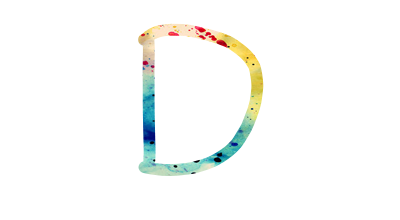
<style>
.page{position:relative;width:400px;height:220px;background:#ffffff}
.page>*{position:absolute;margin:0}
.t1{font:240px "Dudu_Calligraphy";text-transform:uppercase}
</style>
<div class="page">
<p class="t1" style="left:138px;top:23px;width:126px;height:153px">D</p>
</div>
